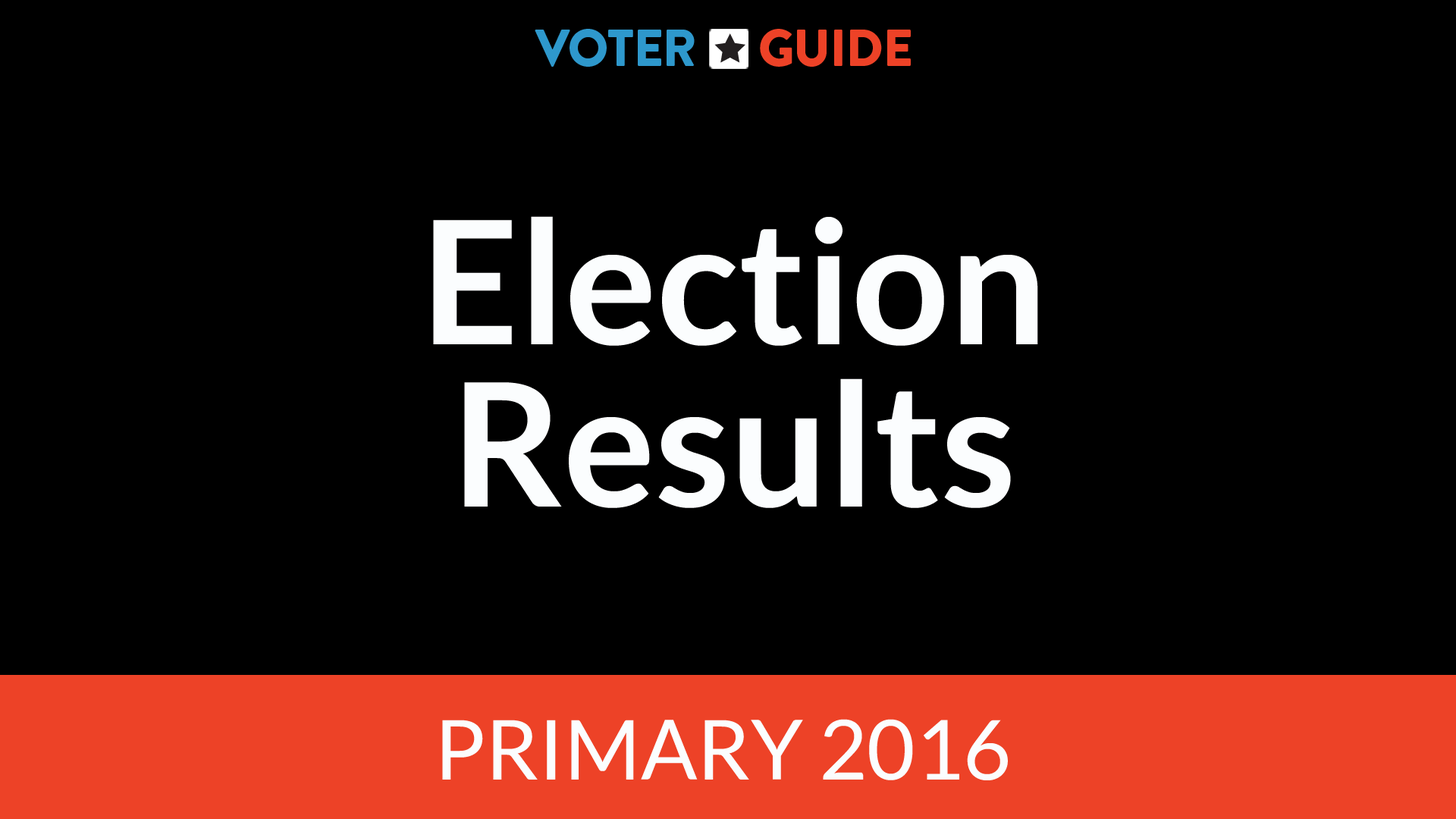
<style>
.page{position:relative;width:1456px;height:819px;background:#000000}
.page>*{position:absolute;margin:0}
.t1{font:51.7px "BrandonGrotesque-Black";letter-spacing:-0.02em;color:#2e98cc}
.t2{font:51.7px "BrandonGrotesque-Black";letter-spacing:-0.02em;color:#ed4227}
.t3{font:171.5px/161.8px "Lato-Bold";color:#fbfdfe}
.t4{font:83px "Lato-Regular";color:#fbfdfe}
</style>
<div class="page">
<p class="t1" style="left:535px;top:29px;width:376px;height:38px">VOTER      <span class="t2">GUIDE</span></p>
<p class="t3" style="left:433px;top:216px;width:605px;height:292px;text-align:center">Election<br>Results</p>
<p class="t4" style="left:442px;top:719px;width:566px;height:61px">PRIMARY 2016</p>
</div>
